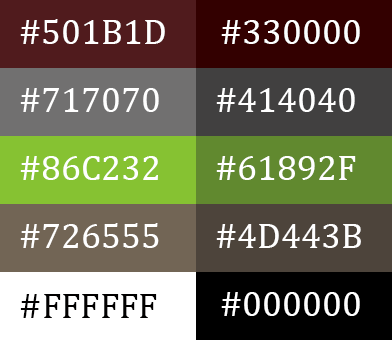
<style>
.page{position:relative;width:392px;height:340px}
.page>*{position:absolute;margin:0}
.t1{font:36px "Cambria";color:#ffffff}
.t2{font:36px "Cambria";color:#010000}
</style>
<div class="page">
<p class="t1" style="left:20px;top:19px;width:145px;height:25px">#501B1D</p>
<p class="t1" style="left:221px;top:20px;width:139px;height:24px">#330000</p>
<p class="t1" style="left:20px;top:88px;width:139px;height:24px">#717070</p>
<p class="t1" style="left:216px;top:88px;width:139px;height:24px">#414040</p>
<p class="t1" style="left:20px;top:156px;width:138px;height:24px">#86C232</p>
<p class="t1" style="left:216px;top:156px;width:140px;height:24px">#61892F</p>
<p class="t1" style="left:20px;top:223px;width:139px;height:25px">#726555</p>
<p class="t1" style="left:216px;top:224px;width:145px;height:24px">#4D443B</p>
<p class="t2" style="left:20px;top:294px;width:137px;height:24px">#FFFFFF</p>
<p class="t1" style="left:221px;top:292px;width:139px;height:24px">#000000</p>
</div>
